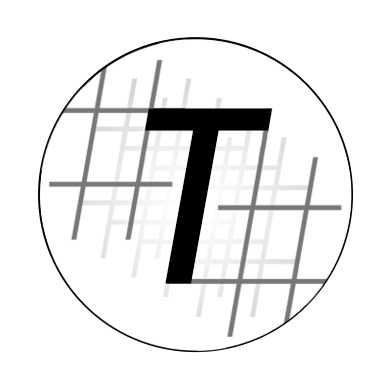
<style>
.page{position:relative;width:392px;height:392px;background:#ffffff}
.page>*{position:absolute;margin:0}
.t1{font:243.4px "TrebuchetMS-Italic";color:#000000;font-weight:bold}
</style>
<div class="page">
<p class="t1" style="left:137px;top:108px;width:143px;height:176px">T</p>
</div>
